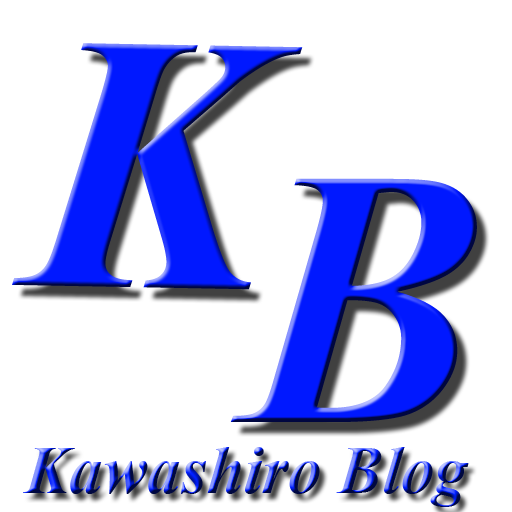
<style>
.page{position:relative;width:512px;height:512px;background:#ffffff}
.page>*{position:absolute;margin:0}
.t1{font:366.6px "TimesNewRomanPS-BoldItalicMT";color:#0018ff}
.t2{font:66.7px "TimesNewRomanPS-BoldItalicMT"}
</style>
<div class="page">
<p class="t1" style="left:12px;top:43px;width:291px;height:247px;rotate:1deg">K</p>
<p class="t1" style="left:230px;top:178px;width:247px;height:244px">B</p>
<p class="t2" style="left:23px;top:447px;width:446px;height:60px">Kawashiro Blog</p>
</div>
